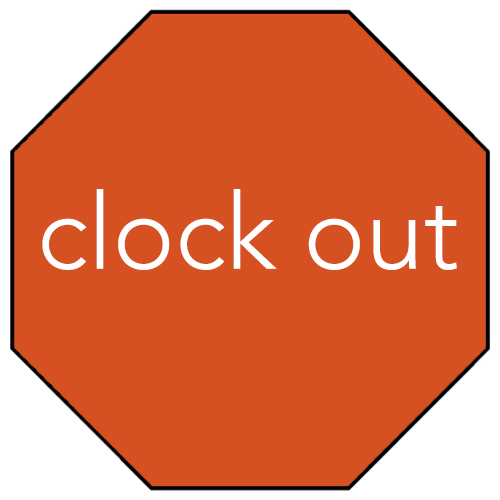
<style>
.page{position:relative;width:500px;height:500px;background:#d55121}
.page>*{position:absolute;margin:0}
.t1{font:105px "Avenir-Light";color:#ffffff}
</style>
<div class="page">
<p class="t1" style="left:42px;top:189px;width:415px;height:81px">clock out</p>
</div>
